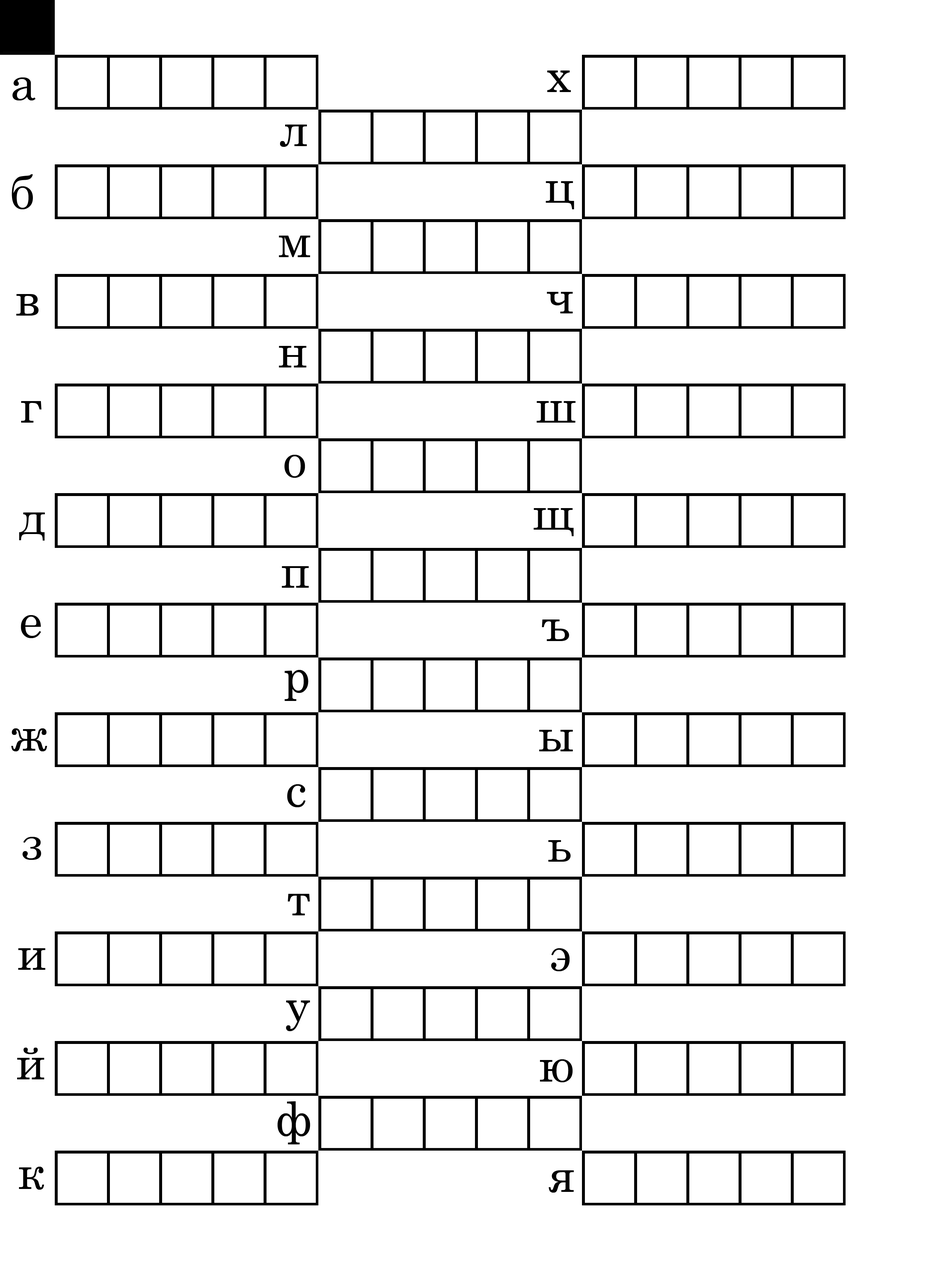
<style>
.page{position:relative;width:931px;height:1281px;background:#ffffff}
.page>*{position:absolute;margin:0}
.t1{font:47.2px "CenturySchoolbook";color:#000000}
</style>
<div class="page">
<p class="t1" style="left:12px;top:77px;width:23px;height:23px">а</p>
<p class="t1" style="left:547px;top:70px;width:24px;height:22px">х</p>
<p class="t1" style="left:280px;top:125px;width:27px;height:22px">л</p>
<p class="t1" style="left:12px;top:174px;width:21px;height:35px">б</p>
<p class="t1" style="left:546px;top:181px;width:28px;height:28px">ц</p>
<p class="t1" style="left:279px;top:236px;width:31px;height:21px">м</p>
<p class="t1" style="left:16px;top:294px;width:23px;height:21px">в</p>
<p class="t1" style="left:547px;top:292px;width:26px;height:21px">ч</p>
<p class="t1" style="left:279px;top:346px;width:27px;height:21px">н</p>
<p class="t1" style="left:21px;top:401px;width:21px;height:21px">г</p>
<p class="t1" style="left:537px;top:401px;width:39px;height:21px">ш</p>
<p class="t1" style="left:284px;top:455px;width:21px;height:23px">о</p>
<p class="t1" style="left:533px;top:508px;width:41px;height:28px">щ</p>
<p class="t1" style="left:19px;top:512px;width:26px;height:28px">д</p>
<p class="t1" style="left:282px;top:566px;width:27px;height:22px">п</p>
<p class="t1" style="left:21px;top:615px;width:20px;height:23px">е</p>
<p class="t1" style="left:542px;top:619px;width:27px;height:22px">ъ</p>
<p class="t1" style="left:284px;top:670px;width:25px;height:31px">р</p>
<p class="t1" style="left:11px;top:728px;width:36px;height:23px">ж</p>
<p class="t1" style="left:539px;top:730px;width:34px;height:21px">ы</p>
<p class="t1" style="left:287px;top:784px;width:19px;height:23px">с</p>
<p class="t1" style="left:22px;top:837px;width:19px;height:23px">з</p>
<p class="t1" style="left:548px;top:840px;width:23px;height:21px">ь</p>
<p class="t1" style="left:288px;top:894px;width:22px;height:21px">т</p>
<p class="t1" style="left:18px;top:948px;width:27px;height:21px">и</p>
<p class="t1" style="left:551px;top:948px;width:19px;height:23px">э</p>
<p class="t1" style="left:286px;top:1000px;width:24px;height:31px">у</p>
<p class="t1" style="left:17px;top:1047px;width:27px;height:32px">й</p>
<p class="t1" style="left:540px;top:1059px;width:33px;height:23px">ю</p>
<p class="t1" style="left:278px;top:1101px;width:32px;height:43px">ф</p>
<p class="t1" style="left:19px;top:1166px;width:25px;height:23px">к</p>
<p class="t1" style="left:549px;top:1170px;width:25px;height:22px">я</p>
</div>
